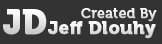
<style>
.page{position:relative;width:162px;height:44px;background:#333333}
.page>*{position:absolute;margin:0}
.t1{font:34px "Museo900-Regular";font-weight:bold}
.t2{font:14px "Museo500-Regular";color:#ffffff;font-weight:bold}
.t3{font:18px "Museo900-Regular";color:#eaeaea;font-weight:bold}
</style>
<div class="page">
<p class="t1" style="left:3px;top:9px;width:44px;height:26px">JD</p>
<p class="t2" style="left:81px;top:8px;width:76px;height:14px">Created By</p>
<p class="t3" style="left:48px;top:21px;width:108px;height:18px">Jeff Dlouhy</p>
</div>
